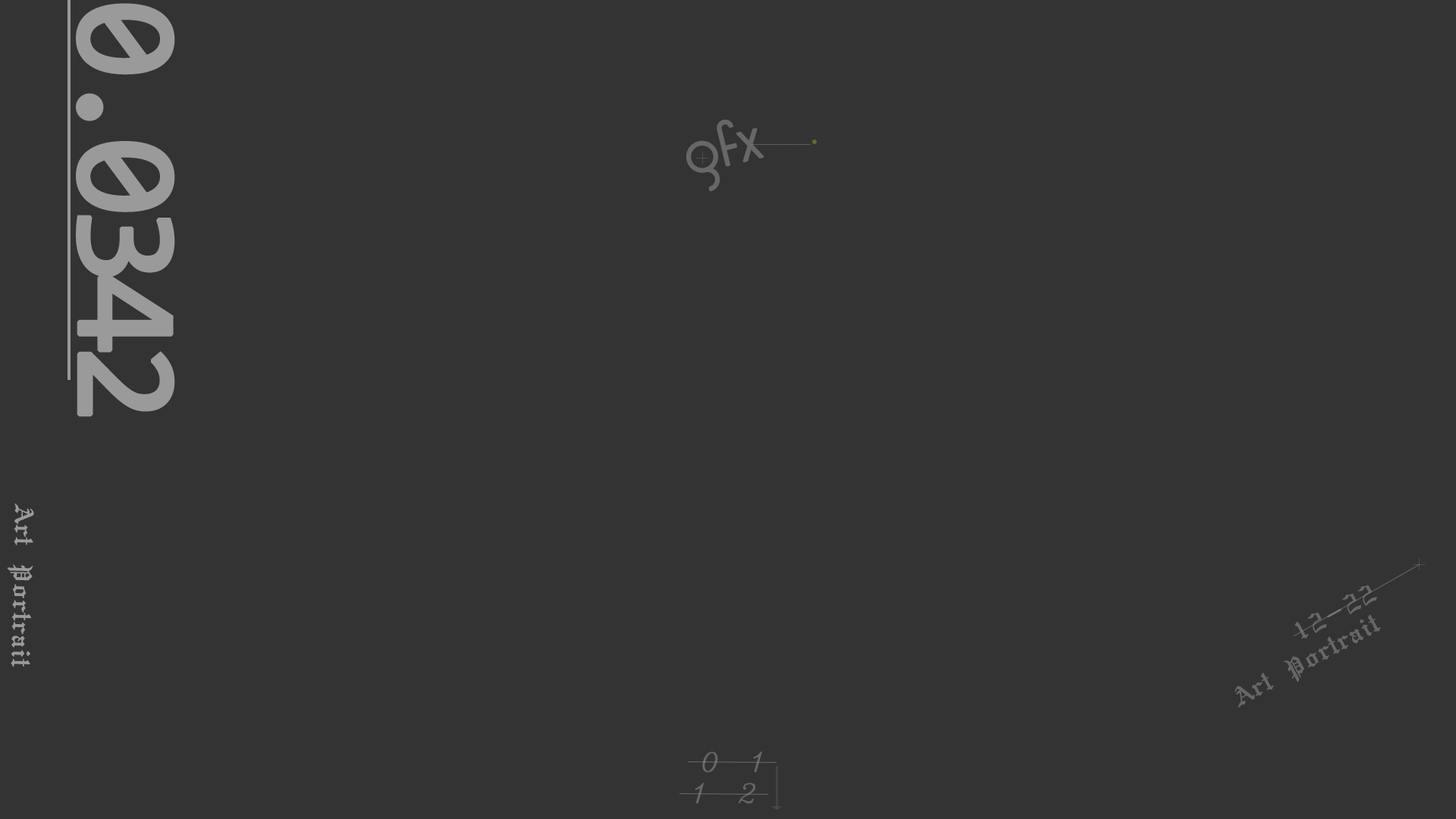
<style>
.page{position:relative;width:1456px;height:819px;background:#333333}
.page>*{position:absolute;margin:0}
.t1{font:144.3px "Consolas";letter-spacing:-0.1em;color:#9a9a9a;font-weight:bold}
.t2{font:57.6px "TimeBurner";color:#676767;font-weight:bold}
.t3{font:24.1px "GothicE";color:#9a9a9a;font-weight:bold}
.t4{font:24.1px "GothicE";color:#676767;font-weight:bold}
.t5{font:26.1px "ItalicC";letter-spacing:1.06em;color:#676767;font-weight:bold}
</style>
<div class="page">
<p class="t1" style="left:76px;top:3px;width:99px;height:414px;rotate:90deg">0.0342</p>
<p class="t2" style="left:686px;top:119px;width:78px;height:73px;rotate:-14deg">gfx</p>
<p class="t3" style="left:7px;top:504px;width:27px;height:163px;rotate:91deg">Art Portrait</p>
<p class="t4" style="left:1294px;top:585px;width:83px;height:54px;rotate:-29deg">12-22</p>
<p class="t4" style="left:1235px;top:614px;width:146px;height:94px;rotate:-29deg">Art Portrait</p>
<p class="t5" style="left:695px;top:751px;width:67px;height:53px;text-align:center">01<br>12</p>
</div>
